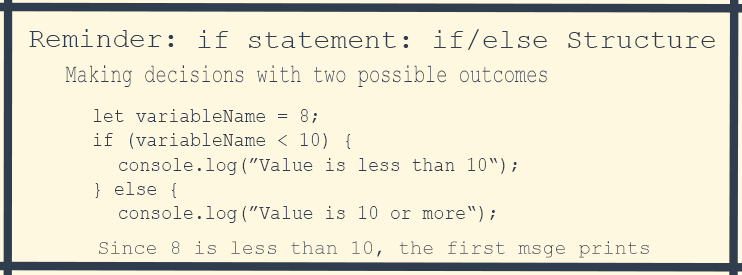
<style>
.page{position:relative;width:742px;height:275px;background:#fff8e1}
.page>*{position:absolute;margin:0}
.t1{font:28px "CourierNewPSMT";color:#303d4e}
.t2{font:26.5px "CourierNewPSMT";color:#303d4e;scale:0.71 1}
.t3{font:20.3px "CourierNewPSMT";color:#303d4e;scale:0.89 1}
.t4{font:22.2px "CourierNewPS-BoldItalicMT";color:#303d4e;scale:0.89 1}
.t5{font:20px "CourierNewPSMT";color:#303d4e}
</style>
<div class="page">
<p class="t1" style="left:29px;top:29px;width:145px;height:18px">Reminder:</p>
<p class="t1" style="left:198px;top:29px;width:517px;height:21px">if statement: if/else Structure</p>
<p class="t2" style="left:65px;top:65px;width:482px;height:22px">Making decisions with two possible outcomes</p>
<p class="t3" style="left:93px;top:109px;width:424px;height:114px"><span class="t4">  <br><br>  </span>let variableName = 8;<br>  if (variableName &lt; 10) {<br>   console.log(”Value is less than 10“);<br>  } else {<br>   console.log(”Value is 10 or more“);</p>
<p class="t5" style="left:99px;top:241px;width:550px;height:17px">Since 8 is less than 10, the first msge prints</p>
</div>
